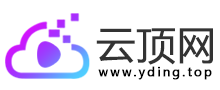
<style>
.page{position:relative;width:220px;height:90px;background:#ffffff}
.page>*{position:absolute;margin:0}
.t1{font:39.5px "MicrosoftYaHei";color:#333333;font-weight:bold}
.t2{font:12px "MicrosoftYaHei";letter-spacing:0.16em;color:#000000;font-weight:bold}
</style>
<div class="page">
<p class="t1" style="left:96px;top:28px;width:117px;height:37px">云顶网</p>
<p class="t2" style="left:98px;top:66px;width:114px;height:14px">www.yding.top</p>
</div>
